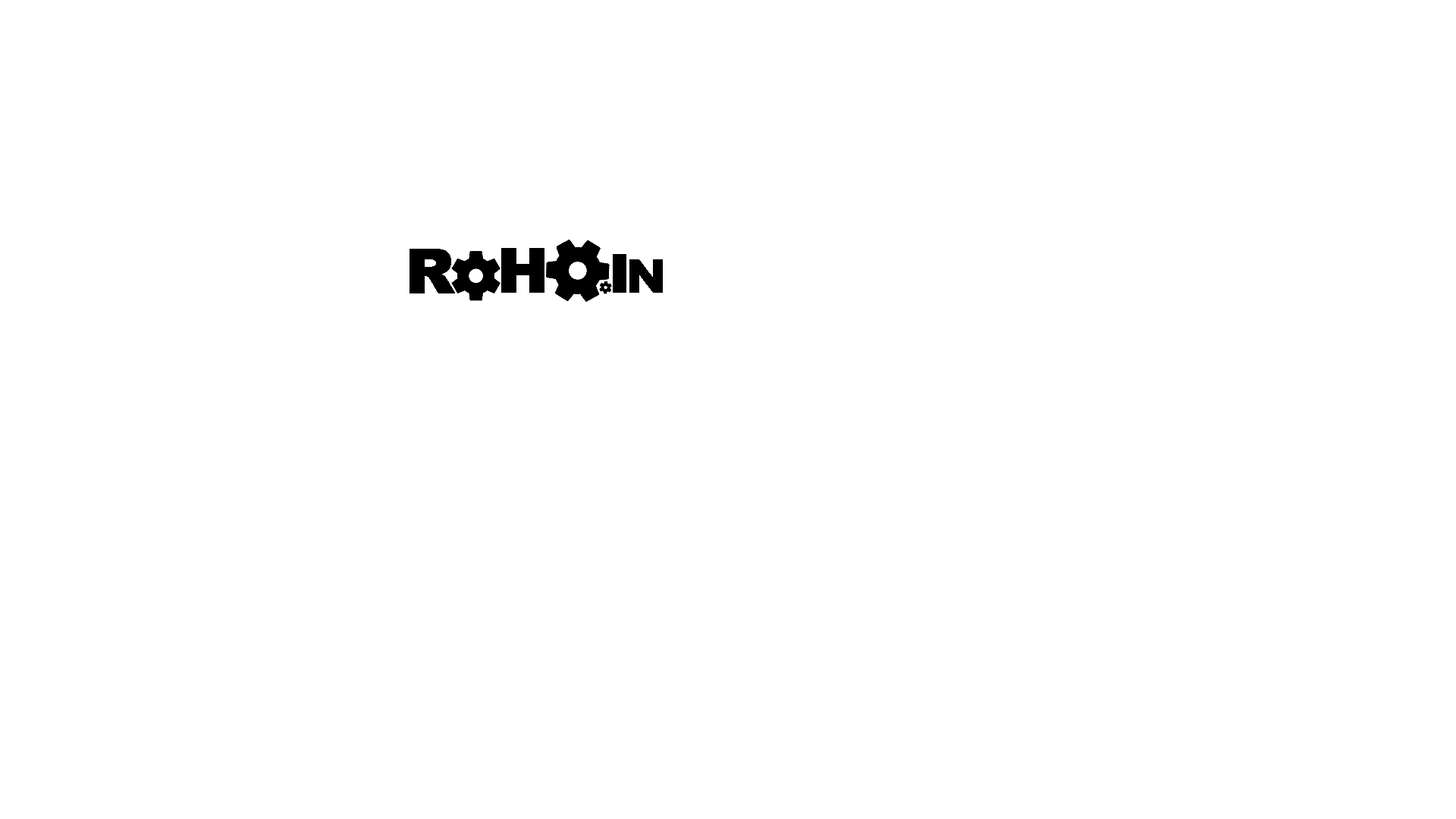
<style>
.page{position:relative;width:1456px;height:819px;background:#ffffff}
.page>*{position:absolute;margin:0}
.t1{font:61.4px "Arial-Black";color:#000000;font-weight:bold}
.t2{font:53.1px "Arial-Black";letter-spacing:-0.075em;color:#000000;font-weight:bold}
.t3{font:45.5px "Arial-Black";letter-spacing:-0.075em;color:#000000;font-weight:bold}
</style>
<div class="page">
<p class="t1" style="left:409px;top:249px;width:46px;height:44px">R</p>
<p class="t1" style="left:501px;top:248px;width:43px;height:45px">H</p>
<p class="t2" style="left:613px;top:254px;width:50px;height:39px">I<span class="t3">N</span></p>
</div>
